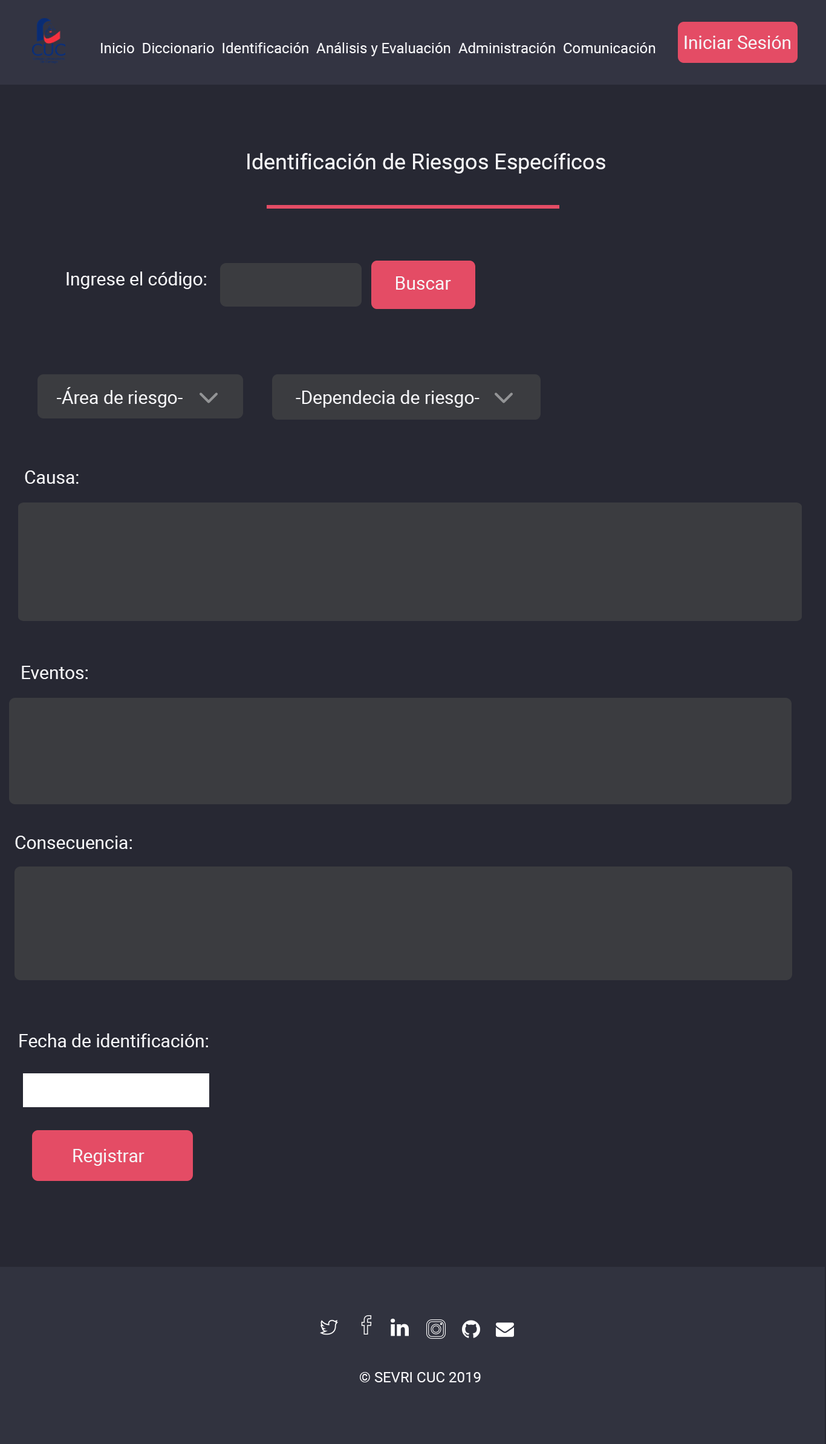
<style>
.page{position:relative;width:826px;height:1444px;background:#272833}
.page>*{position:absolute;margin:0}
.t1{font:18.1px "Roboto-Regular";color:#f6f6f9}
.t2{font:14.5px "Roboto-Regular";color:#f6f6f9}
.t3{font:21.8px "Roboto-Regular";color:#f6f6f9}
</style>
<div class="page">
<p class="t1" style="left:684px;top:36px;width:106px;height:13px">Iniciar Sesión</p>
<p class="t2" style="left:101px;top:42px;width:554px;height:14px">Inicio  Diccionario  Identificación  Análisis y Evaluación  Administración  Comunicación</p>
<p class="t3" style="left:247px;top:153px;width:358px;height:21px">Identificación de Riesgos Específicos</p>
<p class="t1" style="left:67px;top:271px;width:139px;height:18px">Ingrese el código:</p>
<p class="t1" style="left:396px;top:276px;width:55px;height:14px">Buscar</p>
<p class="t1" style="left:57px;top:387px;width:126px;height:21px">-Área de riesgo-</p>
<p class="t1" style="left:296px;top:390px;width:183px;height:18px">-Dependecia de riesgo-</p>
<p class="t1" style="left:25px;top:470px;width:54px;height:14px">Causa:</p>
<p class="t1" style="left:22px;top:666px;width:66px;height:13px">Eventos:</p>
<p class="t1" style="left:15px;top:836px;width:117px;height:13px">Consecuencia:</p>
<p class="t1" style="left:19px;top:1033px;width:189px;height:14px">Fecha de identificación:</p>
<p class="t1" style="left:73px;top:1149px;width:72px;height:17px">Registrar</p>
<p class="t2" style="left:360px;top:1372px;width:121px;height:10px">© SEVRI CUC 2019</p>
</div>
